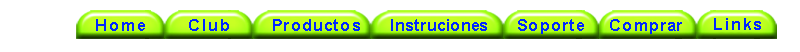
<style>
.page{position:relative;width:800px;height:52px;background:#ffffff}
.page>*{position:absolute;margin:0}
.t1{font:15.9px "Arial-BoldMT";letter-spacing:0.15em;color:#0028ff}
.t2{font:15.9px "Arial-BoldMT";letter-spacing:0.1em;color:#0028ff}
.t3{font:15.9px "Arial-BoldMT";letter-spacing:0.05em;color:#0028ff}
</style>
<div class="page">
<p class="t1" style="left:189px;top:19px;width:40px;height:12px">Club</p>
<p class="t2" style="left:273px;top:19px;width:87px;height:12px">Productos</p>
<p class="t3" style="left:391px;top:19px;width:96px;height:12px">Instruciones</p>
<p class="t2" style="left:518px;top:19px;width:66px;height:15px">Soporte</p>
<p class="t2" style="left:610px;top:19px;width:72px;height:15px">Comprar</p>
<p class="t1" style="left:714px;top:18px;width:47px;height:12px">Links</p>
</div>
